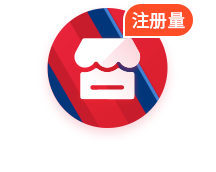
<style>
.page{position:relative;width:216px;height:172px;background:#ffffff}
.page>*{position:absolute;margin:0}
.t1{font:18px "SourceHanSansCN-Medium";letter-spacing:0.012em;color:#ffffff}
</style>
<div class="page">
<p class="t1" style="left:132px;top:11px;width:53px;height:18px">注册量</p>
</div>
